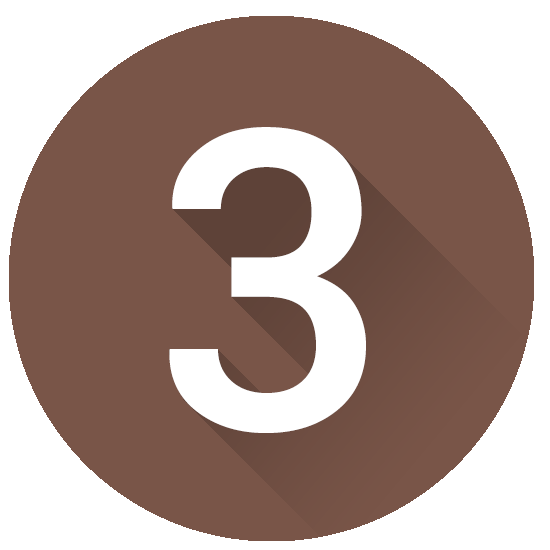
<style>
.page{position:relative;width:550px;height:550px;background:#795548}
.page>*{position:absolute;margin:0}
.t1{font:418.1px "Roboto-Medium";color:#ffffff}
</style>
<div class="page">
<p class="t1" style="left:169px;top:127px;width:197px;height:306px">3</p>
</div>
